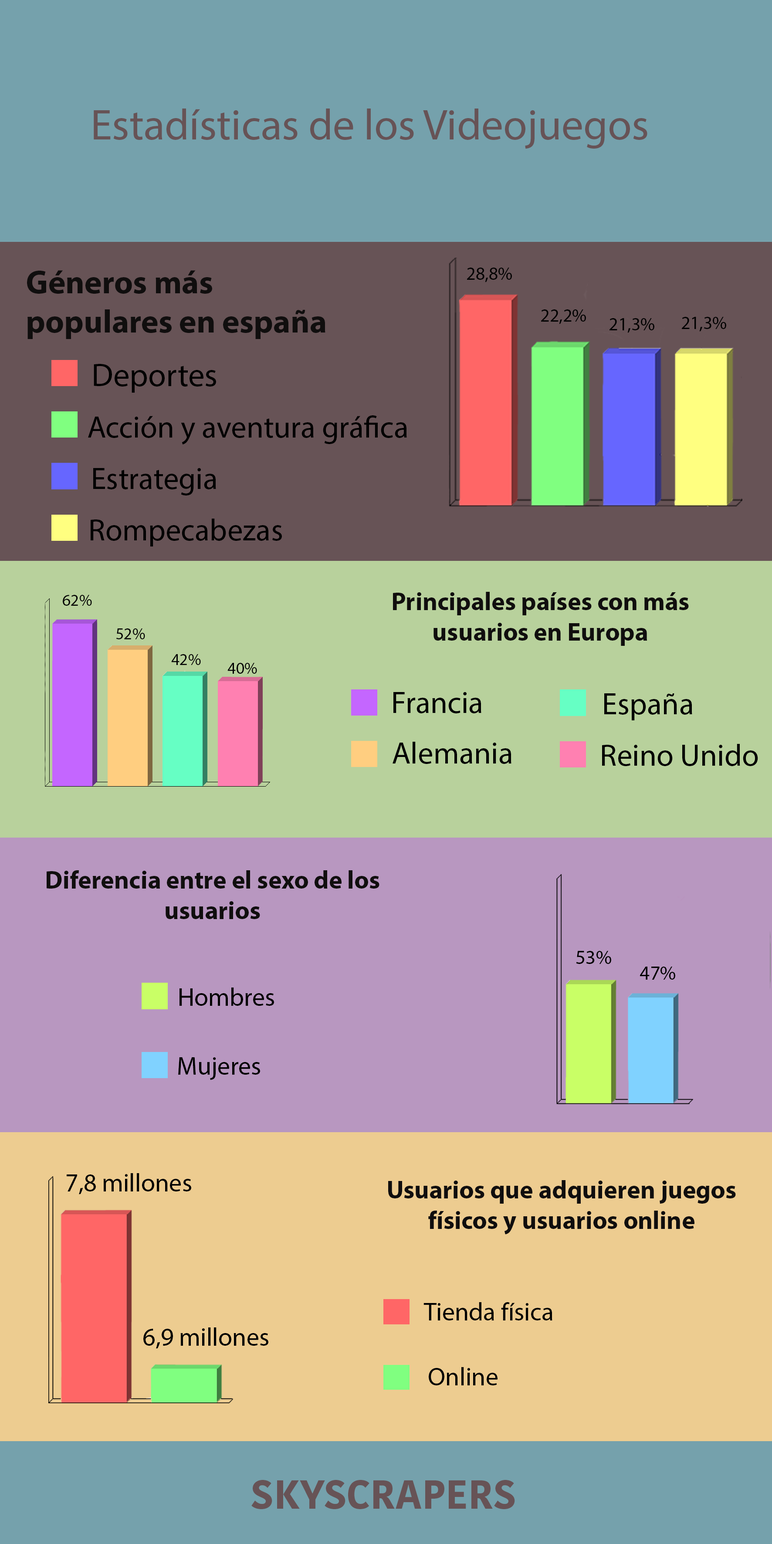
<style>
.page{position:relative;width:772px;height:1544px;background:#75a1ac}
.page>*{position:absolute;margin:0}
.t1{font:43.6px "MyriadPro-Regular";color:#675356}
.t2{font:18.2px "MyriadPro-Regular";color:#000000}
.t3{font:32.7px "MyriadPro-Bold";color:#100e0e}
.t4{font:32.7px "MyriadPro-Regular";color:#000000}
.t5{font:30.9px "MyriadPro-Regular";color:#000000}
.t6{font:25.4px "MyriadPro-Bold";color:#100e0e}
.t7{font:16.3px "MyriadPro-Regular";color:#000000}
.t8{font:20px "MyriadPro-Regular";color:#000000}
.t9{font:25.4px "MyriadPro-Regular";color:#000000}
.t10{font:40.2px "KohinoorDevanagari-Bold";color:#675356}
</style>
<div class="page">
<p class="t1" style="left:94px;top:109px;width:554px;height:40px">Estadísticas de los Videojuegos</p>
<p class="t2" style="left:467px;top:268px;width:45px;height:14px">28,8%</p>
<p class="t3" style="left:27px;top:270px;width:299px;height:69px">Géneros más populares en españa</p>
<p class="t2" style="left:541px;top:309px;width:45px;height:15px">22,2%</p>
<p class="t2" style="left:682px;top:317px;width:44px;height:15px">21,3%</p>
<p class="t2" style="left:610px;top:318px;width:45px;height:15px">21,3%</p>
<p class="t4" style="left:94px;top:364px;width:122px;height:29px">Deportes</p>
<p class="t5" style="left:88px;top:415px;width:319px;height:30px">Acción y aventura gráfica</p>
<p class="t5" style="left:93px;top:468px;width:123px;height:28px">Estrategia</p>
<p class="t5" style="left:91px;top:519px;width:191px;height:28px">Rompecabezas</p>
<p class="t6" style="left:393px;top:592px;width:296px;height:54px;text-align:center">Principales países con más usuarios en Europa</p>
<p class="t7" style="left:63px;top:595px;width:29px;height:11px">62%</p>
<p class="t7" style="left:116px;top:628px;width:29px;height:11px">52%</p>
<p class="t7" style="left:171px;top:654px;width:30px;height:11px">42%</p>
<p class="t7" style="left:227px;top:663px;width:30px;height:11px">40%</p>
<p class="t5" style="left:394px;top:692px;width:88px;height:21px">Francia</p>
<p class="t5" style="left:604px;top:693px;width:89px;height:27px">España</p>
<p class="t5" style="left:393px;top:742px;width:119px;height:22px">Alemania</p>
<p class="t5" style="left:602px;top:744px;width:156px;height:22px">Reino Unido</p>
<p class="t6" style="left:47px;top:870px;width:333px;height:49px;text-align:center">Diferencia entre el sexo de los usuarios</p>
<p class="t8" style="left:576px;top:951px;width:35px;height:13px">53%</p>
<p class="t8" style="left:640px;top:967px;width:36px;height:13px">47%</p>
<p class="t9" style="left:180px;top:988px;width:94px;height:18px">Hombres</p>
<p class="t9" style="left:178px;top:1057px;width:82px;height:23px">Mujeres</p>
<p class="t9" style="left:67px;top:1173px;width:124px;height:22px">7,8 millones</p>
<p class="t6" style="left:388px;top:1180px;width:348px;height:55px;text-align:center">Usuarios que adquieren juegos físicos y usuarios online</p>
<p class="t9" style="left:424px;top:1302px;width:129px;height:19px">Tienda física</p>
<p class="t9" style="left:143px;top:1327px;width:125px;height:22px">6,9 millones</p>
<p class="t9" style="left:429px;top:1367px;width:69px;height:18px">Online</p>
<p class="t10" style="left:251px;top:1480px;width:264px;height:29px">SKYSCRAPERS</p>
</div>
